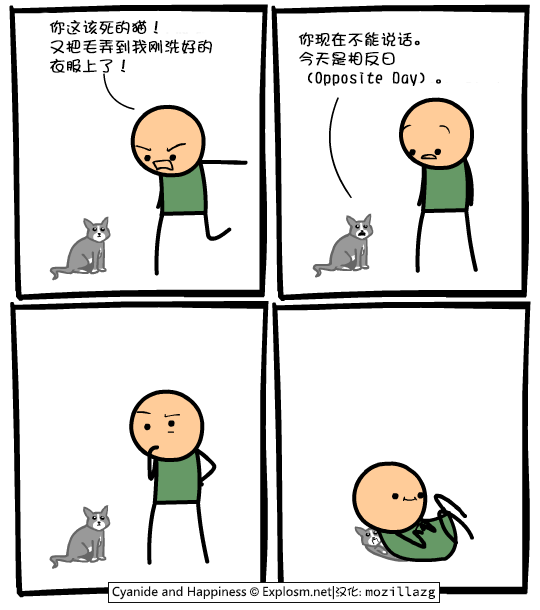
<style>
.page{position:relative;width:540px;height:610px;background:#ffffff}
.page>*{position:absolute;margin:0}
.t1{font:16px "DFShaoNvW5";color:#000000;font-weight:bold}
</style>
<div class="page">
<p class="t1" style="left:49px;top:20px;width:163px;height:53px">你这该死的猫！<br>又把毛弄到我刚洗好的<br>衣服上了！</p>
<p class="t1" style="left:298px;top:32px;width:143px;height:54px">你现在不能说话。<br>今天是相反日<br>（Opposite Day）。</p>
</div>
